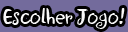
<style>
.page{position:relative;width:128px;height:32px;background:#736b9c}
.page>*{position:absolute;margin:0}
.t1{font:23.9px "Jewels";color:#f8f8f8}
</style>
<div class="page">
<p class="t1" style="left:3px;top:8px;width:122px;height:21px">Escolher Jogo!</p>
</div>
